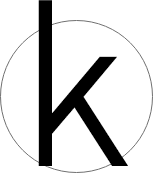
<style>
.page{position:relative;width:153px;height:173px;background:#ffffff}
.page>*{position:absolute;margin:0}
.t1{font:236px "KayakSans-Light";color:#000000}
</style>
<div class="page">
<p class="t1" style="left:38px;top:0px;width:90px;height:166px">k</p>
</div>
